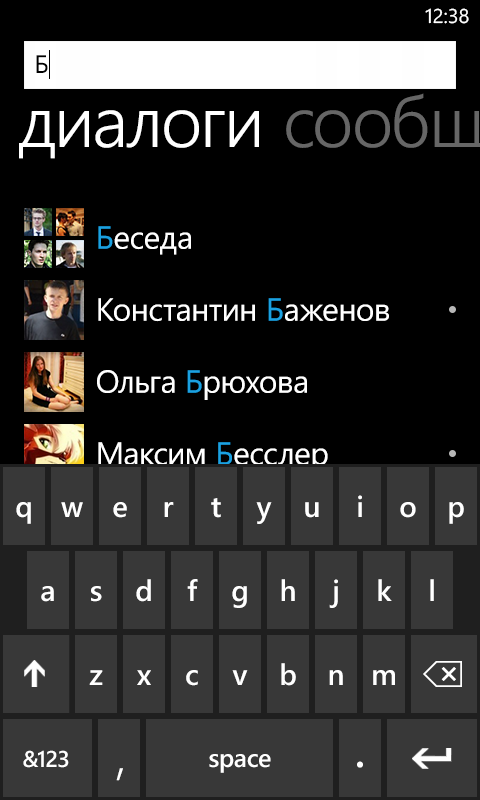
<style>
.page{position:relative;width:480px;height:800px;background:#000000}
.page>*{position:absolute;margin:0}
.t1{font:20px "SegoeWP";color:#ffffff}
.t2{font:25.3px "SegoeWP";letter-spacing:-0.025em;color:#000000}
.t3{font:32px "SegoeWP";letter-spacing:-0.01em;color:#ffffff}
.t4{font:32px "SegoeWP";letter-spacing:-0.01em;color:#1ba1e2}
.t5{font:29.3px "SegoeWP-Semibold";letter-spacing:-0.01em;color:#ffffff}
.t6{font:22.7px "SegoeWP-Semibold";letter-spacing:-0.01em;color:#ffffff}
.t7{font:25.3px "SegoeWP-Semibold";letter-spacing:-0.01em;color:#ffffff}
.t8{font:64px "SegoeWP-SemiLight";letter-spacing:-0.01em;color:#ffffff}
.t9{font:50.7px "SegoeWP-SemiLight";letter-spacing:-0.01em;color:#ffffff}
</style>
<div class="page">
<p class="t1" style="left:425px;top:8px;width:44px;height:16px">12:38</p>
<p class="t2" style="left:36px;top:55px;width:12px;height:18px">Б</p>
<p class="t3" style="left:98px;top:226px;width:93px;height:29px"><span class="t4">Б</span>еседа</p>
<p class="t3" style="left:98px;top:298px;width:291px;height:24px">Константин <span class="t4">Б</span>аженов</p>
<p class="t3" style="left:97px;top:370px;width:210px;height:30px">Ольга <span class="t4">Б</span>рюхова</p>
<p class="t3" style="left:98px;top:442px;width:230px;height:30px">Максим <span class="t4">Б</span>есслер</p>
<p class="t5" style="left:358px;top:495px;width:4px;height:22px">i</p>
<p class="t5" style="left:16px;top:502px;width:15px;height:22px">q</p>
<p class="t5" style="left:61px;top:502px;width:22px;height:15px">w</p>
<p class="t5" style="left:113px;top:502px;width:14px;height:16px">e</p>
<p class="t5" style="left:164px;top:502px;width:10px;height:15px">r</p>
<p class="t5" style="left:211px;top:498px;width:10px;height:20px">t</p>
<p class="t5" style="left:256px;top:502px;width:16px;height:22px">y</p>
<p class="t5" style="left:305px;top:502px;width:14px;height:16px">u</p>
<p class="t5" style="left:400px;top:502px;width:16px;height:16px">o</p>
<p class="t5" style="left:449px;top:502px;width:15px;height:22px">p</p>
<p class="t5" style="left:136px;top:579px;width:15px;height:23px">d</p>
<p class="t5" style="left:187px;top:579px;width:11px;height:22px">f</p>
<p class="t5" style="left:281px;top:579px;width:14px;height:22px">h</p>
<p class="t5" style="left:329px;top:579px;width:9px;height:29px">j</p>
<p class="t5" style="left:378px;top:579px;width:14px;height:22px">k</p>
<p class="t5" style="left:430px;top:579px;width:4px;height:22px">l</p>
<p class="t5" style="left:41px;top:586px;width:13px;height:16px">a</p>
<p class="t5" style="left:91px;top:586px;width:11px;height:16px">s</p>
<p class="t5" style="left:232px;top:586px;width:15px;height:22px">g</p>
<p class="t5" style="left:281px;top:663px;width:15px;height:23px">b</p>
<p class="t5" style="left:89px;top:670px;width:14px;height:15px">z</p>
<p class="t5" style="left:137px;top:670px;width:14px;height:15px">x</p>
<p class="t5" style="left:186px;top:670px;width:12px;height:16px">c</p>
<p class="t5" style="left:232px;top:670px;width:16px;height:15px">v</p>
<p class="t5" style="left:329px;top:670px;width:14px;height:15px">n</p>
<p class="t5" style="left:373px;top:670px;width:22px;height:15px">m</p>
<p class="t6" style="left:23px;top:750px;width:46px;height:18px">&amp;123</p>
<p class="t7" style="left:209px;top:754px;width:62px;height:19px">space</p>
<p class="t8" style="left:357px;top:761px;width:6px;height:7px">.</p>
<p class="t9" style="left:116px;top:768px;width:7px;height:13px">,</p>
</div>
